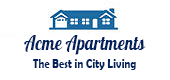
<style>
.page{position:relative;width:170px;height:80px;background:#ffffff}
.page>*{position:absolute;margin:0}
.t1{font:20px "Galada-Regular";color:#01215e;scale:0.86 1}
.t2{font:13.3px "BerlinSansFBDemi-Bold";color:#01215e;scale:0.78 1}
</style>
<div class="page">
<p class="t1" style="left:24px;top:35px;width:122px;height:20px">Acme Apartments</p>
<p class="t2" style="left:33px;top:59px;width:103px;height:11px">The Best in City Living</p>
</div>
